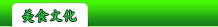
<style>
.page{position:relative;width:218px;height:27px}
.page>*{position:absolute;margin:0}
.t1{font:14px "¿¬Ìå";color:#3bee54;font-variant:small-caps}
</style>
<div class="page">
<p class="t1" style="left:22px;top:9px;width:55px;height:13px">美食文化</p>
</div>
